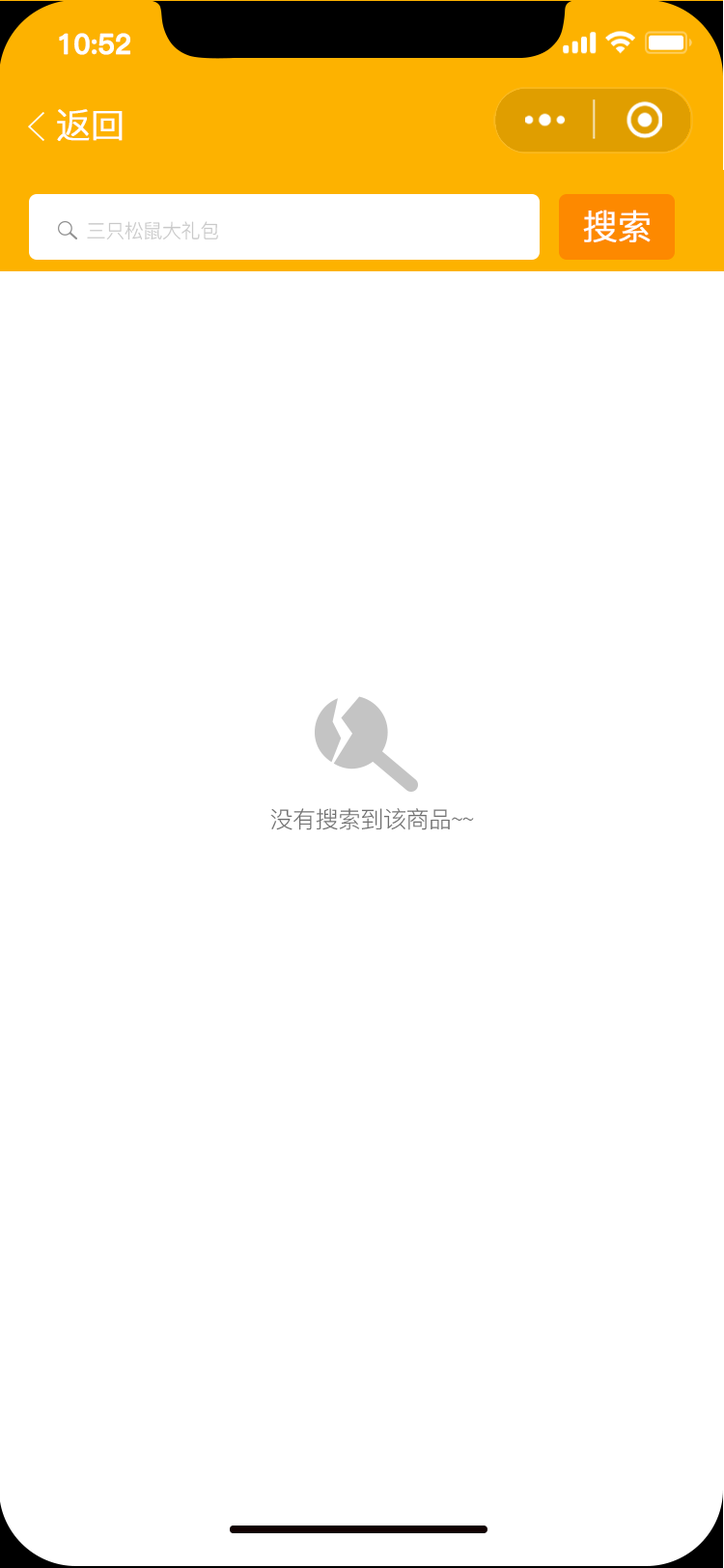
<style>
.page{position:relative;width:724px;height:1568px;background:#ffffff}
.page>*{position:absolute;margin:0}
.t1{font:27.5px "PingFang-SC-Bold";letter-spacing:-0.02em;color:#ffffff;font-weight:bold}
.t2{font:34.8px "PingFang-SC-Regular";letter-spacing:-0.02em;color:#ffffff;font-weight:bold}
.t3{font:19.3px "PingFang-SC-Regular";letter-spacing:-0.02em;color:#c9c9c9}
.t4{font:23.2px "PingFang-SC-Regular";letter-spacing:-0.02em;color:#707070}
</style>
<div class="page">
<p class="t1" style="left:59px;top:33px;width:71px;height:22px">10:52</p>
<p class="t2" style="left:57px;top:109px;width:66px;height:32px">返回</p>
<p class="t2" style="left:583px;top:210px;width:68px;height:32px">搜索</p>
<p class="t3" style="left:87px;top:221px;width:131px;height:19px">三只松鼠大礼包</p>
<p class="t4" style="left:270px;top:808px;width:204px;height:22px">没有搜索到该商品~~</p>
</div>
